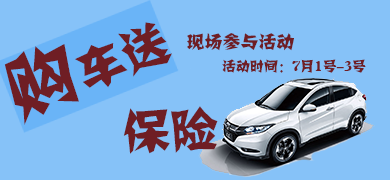
<style>
.page{position:relative;width:390px;height:180px;background:#86c2f8}
.page>*{position:absolute;margin:0}
.t1{font:18px "FZJZJW--GB1-0";color:#6f1e24}
.t2{font:14px "FZJZJW--GB1-0";color:#6f1e24}
.t3{font:48px "FZJZJW--GB1-0";color:#6f1e24}
</style>
<div class="page">
<p class="t1" style="left:187px;top:33px;width:107px;height:18px">现场参与活动</p>
<p class="t2" style="left:222px;top:59px;width:144px;height:14px">活动时间：7月1号-3号</p>
<p class="t3" style="left:123px;top:106px;width:95px;height:48px;rotate:-2deg">保险</p>
</div>
